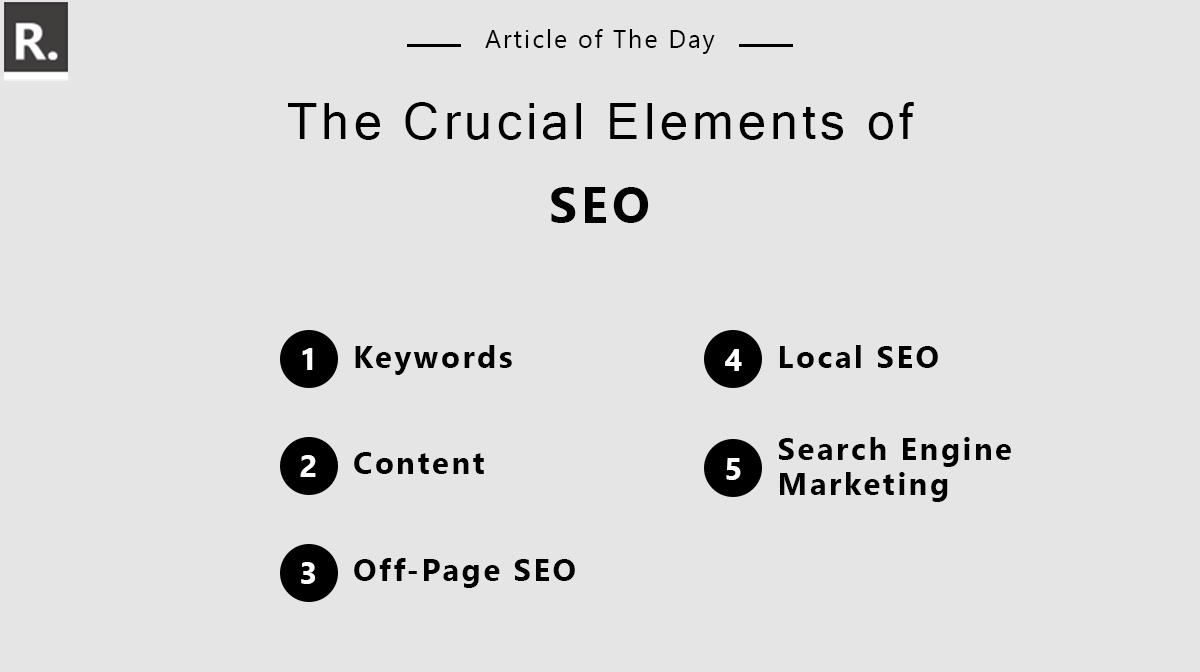
<style>
.page{position:relative;width:1200px;height:672px;background:#e5e5e5}
.page>*{position:absolute;margin:0}
.t1{font:25px "SegoeUI";letter-spacing:0.08em;color:#000000}
.t2{font:50.5px/83.8px "MicrosoftSansSerif";letter-spacing:0.08em;color:#000000}
.t3{font:50.5px/83.8px "SegoeUI-Bold";letter-spacing:0.08em;color:#000000}
.t4{font:31.1px "SegoeUI-Bold";letter-spacing:0.08em;color:#ffffff}
.t5{font:31.1px "SegoeUI-Bold";letter-spacing:0.08em;color:#000000}
.t6{font:31.1px/34.7px "SegoeUI-Bold";letter-spacing:0.08em;color:#000000}
</style>
<div class="page">
<p class="t1" style="left:485px;top:29px;width:230px;height:25px">Article of The Day</p>
<p class="t2" style="left:288px;top:102px;width:626px;height:121px;text-align:center">The Crucial Elements of <span class="t3">SEO</span></p>
<p class="t4" style="left:302px;top:348px;width:11px;height:22px">1</p>
<p class="t5" style="left:355px;top:345px;width:157px;height:30px">Keywords</p>
<p class="t4" style="left:725px;top:349px;width:17px;height:22px">4</p>
<p class="t5" style="left:780px;top:345px;width:158px;height:23px">Local SEO</p>
<p class="t6" style="left:778px;top:437px;width:233px;height:65px;text-align:right">Search Engine <br>Marketing</p>
<p class="t4" style="left:300px;top:455px;width:16px;height:22px">2</p>
<p class="t5" style="left:354px;top:452px;width:130px;height:22px">Content</p>
<p class="t4" style="left:726px;top:458px;width:15px;height:22px">5</p>
<p class="t5" style="left:354px;top:558px;width:221px;height:30px">Off-Page SEO</p>
<p class="t4" style="left:301px;top:562px;width:14px;height:22px">3</p>
</div>
